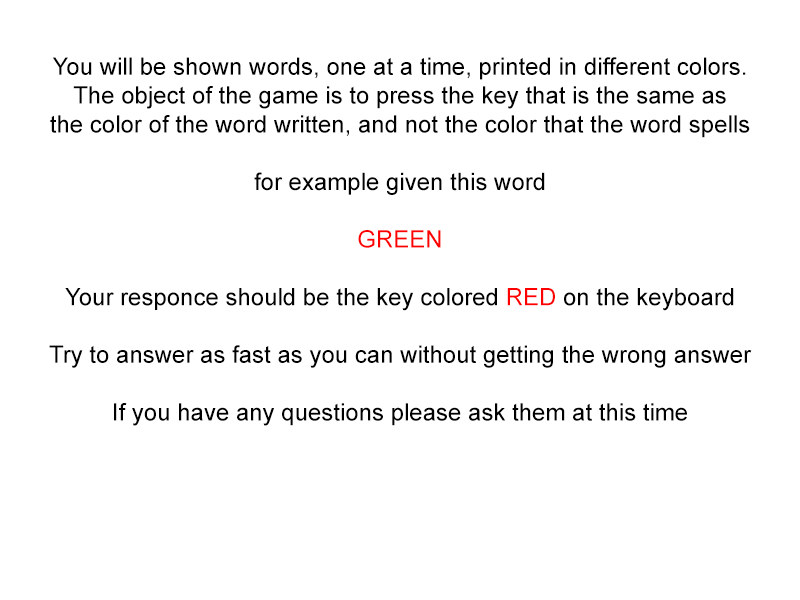
<style>
.page{position:relative;width:800px;height:600px;background:#ffffff}
.page>*{position:absolute;margin:0}
.t1{font:24px "ArialMT";color:#000000}
.t2{font:24px "ArialMT";color:#ff0000}
</style>
<div class="page">
<p class="t1" style="left:49px;top:57px;width:703px;height:369px;text-align:center">You will be shown words, one at a time, printed in different colors.<br>The object of the game is to press the key that is the same as<br>the color of the word written, and not the color that the word spells<br><br>for example given this word<br><br><span class="t2">GREEN<br><br></span>Your responce should be the key colored <span class="t2">RED</span> on the keyboard<br><br>Try to answer as fast as you can without getting the wrong answer<br><br>If you have any questions please ask them at this time</p>
</div>
